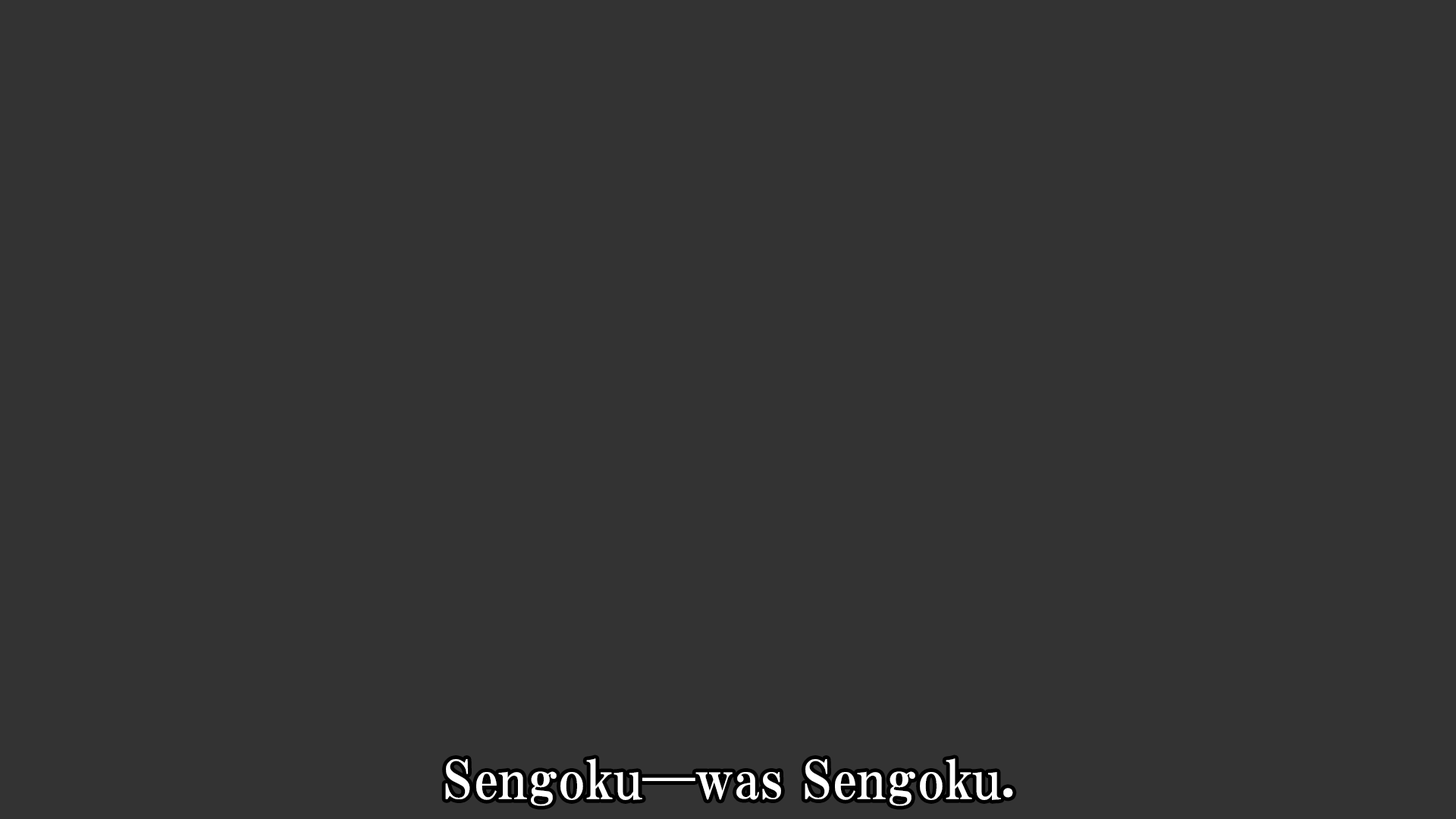
<style>
.page{position:relative;width:1456px;height:819px;background:#333333}
.page>*{position:absolute;margin:0}
.t1{font:53.1px "HGPMinchoE";color:#ffffff}
</style>
<div class="page">
<p class="t1" style="left:445px;top:758px;width:568px;height:48px">Sengoku—was Sengoku.</p>
</div>
